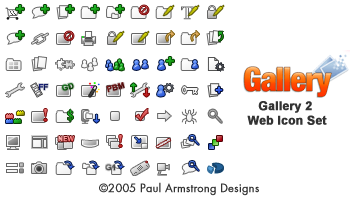
<style>
.page{position:relative;width:355px;height:200px;background:#ffffff}
.page>*{position:absolute;margin:0}
.t1{font:12px "Arial-BoldMT";color:#333333;font-weight:bold}
.t2{font:11px "FuturaStd-Book";color:#333333;font-weight:bold}
</style>
<div class="page">
<p class="t1" style="left:247px;top:101px;width:80px;height:24px;text-align:center">Gallery 2 <br>Web Icon Set</p>
<p class="t2" style="left:99px;top:182px;width:160px;height:14px">©2005 Paul Armstrong Designs</p>
</div>
